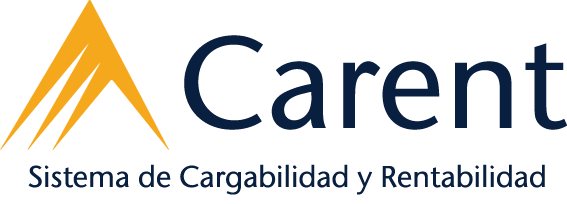
<style>
.page{position:relative;width:567px;height:204px;background:#ffffff}
.page>*{position:absolute;margin:0}
.t1{font:130px "StoneSansProITC-Medium";color:#091f40}
.t2{font:30px "StoneSansProITC-Medium";color:#091f40}
</style>
<div class="page">
<p class="t1" style="left:184px;top:35px;width:383px;height:95px">Carent</p>
<p class="t2" style="left:28px;top:164px;width:517px;height:31px">Sistema de Cargabilidad y Rentabilidad</p>
</div>
